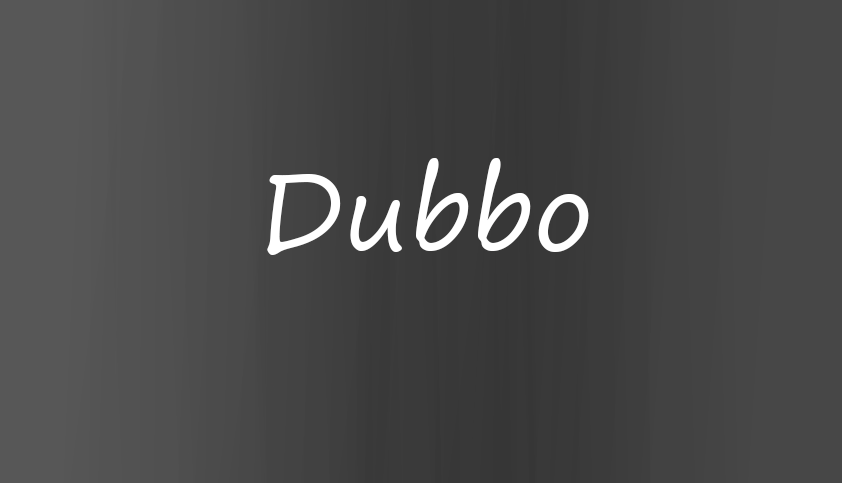
<style>
.page{position:relative;width:842px;height:483px}
.page>*{position:absolute;margin:0}
.t1{font:106.7px "SegoePrint";color:#ffffff}
</style>
<div class="page">
<p class="t1" style="left:267px;top:158px;width:322px;height:97px">Dubbo</p>
</div>
